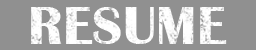
<style>
.page{position:relative;width:256px;height:50px;background:#909090}
.page>*{position:absolute;margin:0}
.t1{font:55.4px "BritannicBold";color:#ffffff}
</style>
<div class="page">
<p class="t1" style="left:31px;top:7px;width:196px;height:37px">RESUME</p>
</div>
